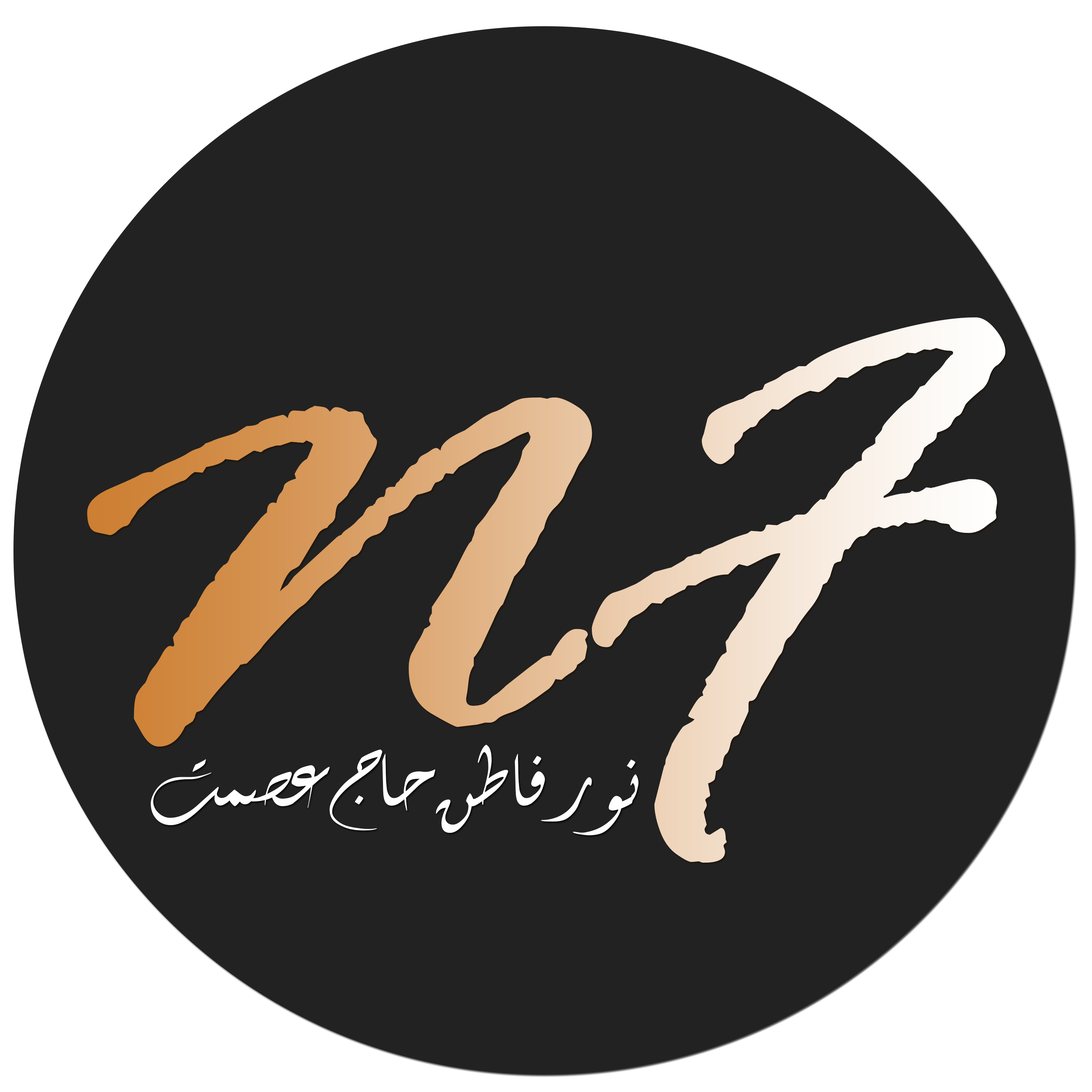
<style>
.page{position:relative;width:1092px;height:1092px;background:#222222}
.page>*{position:absolute;margin:0}
.t1{font:680.1px "RageItalic";scale:1.04 1}
.t2{font:90.9px "DiwaniLetter";letter-spacing:-0.01em;color:#ffffff;scale:1.04 1}
</style>
<div class="page">
<p class="t1" style="left:87px;top:317px;width:918px;height:546px">NF</p>
<p class="t2" style="left:151px;top:745px;width:487px;height:90px">نور فاطن حاج عصمت</p>
</div>
